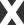
<style>
.page{position:relative;width:24px;height:25px;background:#ffffff}
.page>*{position:absolute;margin:0}
.t1{font:36.4px "Megatron";color:#ffffff;scale:1.28 1}
</style>
<div class="page">
<p class="t1" style="left:0px;top:0px;width:25px;height:25px">X</p>
</div>
